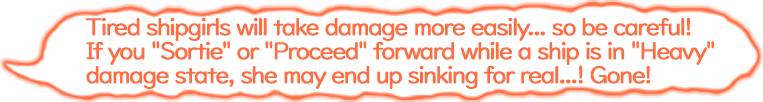
<style>
.page{position:relative;width:763px;height:102px;background:#ffffff}
.page>*{position:absolute;margin:0}
.t1{font:24px/24px "UDDigiKyokashoNP-R";letter-spacing:-0.08em;color:#ff6e40;font-weight:bold}
</style>
<div class="page">
<p class="t1" style="left:85px;top:17px;width:629px;height:72px">Tired shipgirls will take damage more easily... so be careful!<br>If you "Sortie" or "Proceed" forward while a ship is in "Heavy"<br>damage state, she may end up sinking for real...! Gone!</p>
</div>
